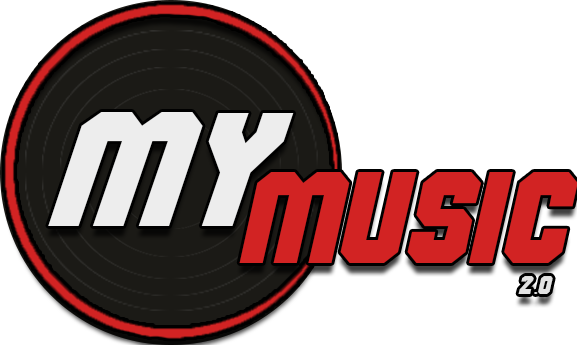
<style>
.page{position:relative;width:577px;height:345px;background:#ffffff}
.page>*{position:absolute;margin:0}
.t1{font:162.8px "Commando";color:#ededed;scale:1.05 1}
.t2{font:129.5px "Commando";color:#d22323}
.t3{font:25.9px "Commando";color:#e3e3e3}
.t4{font:25.9px "TimesNewRomanPSMT";color:#e3e3e3}
</style>
<div class="page">
<p class="t1" style="left:48px;top:112px;width:246px;height:114px">my</p>
<p class="t2" style="left:239px;top:172px;width:339px;height:91px">music</p>
<p class="t3" style="left:518px;top:276px;width:35px;height:18px">2<span class="t4">.</span>0</p>
</div>
